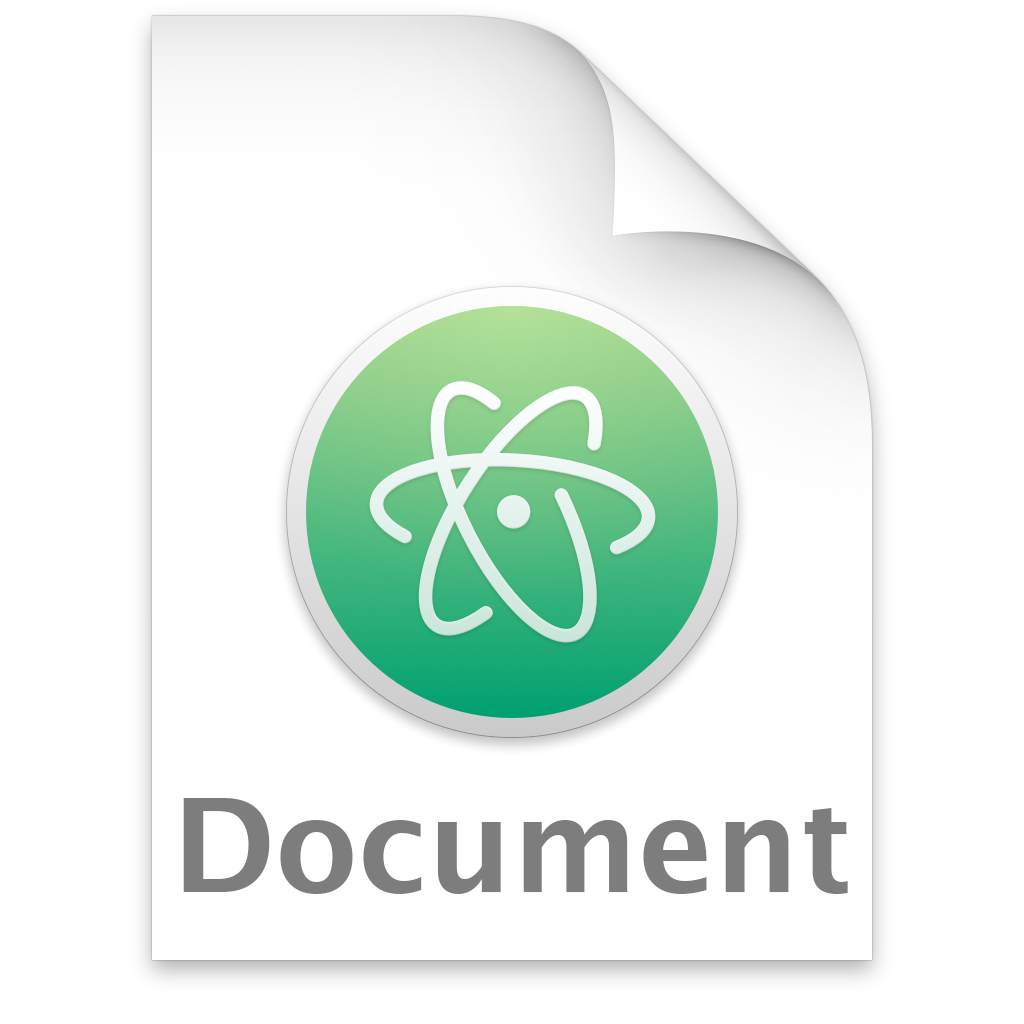
<style>
.page{position:relative;width:1024px;height:1024px;background:#ffffff}
.page>*{position:absolute;margin:0}
.t1{font:130px "LucidaGrande-Bold";color:#7d7d7d}
</style>
<div class="page">
<p class="t1" style="left:183px;top:798px;width:665px;height:96px">Document</p>
</div>
